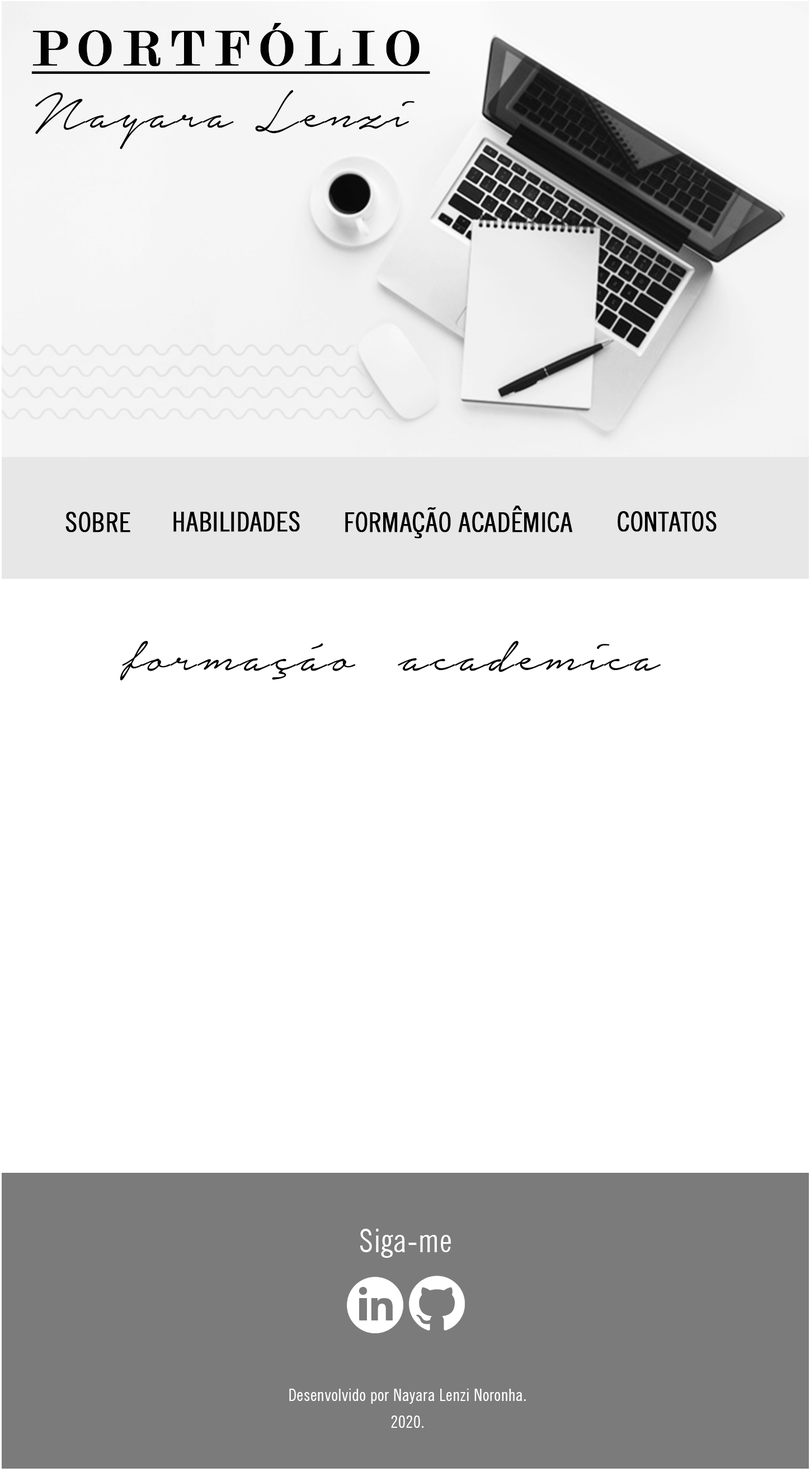
<style>
.page{position:relative;width:810px;height:1472px;background:#ffffff}
.page>*{position:absolute;margin:0}
.t1{font:52.3px "Modern-Regular";letter-spacing:0.2em;color:#010101;font-weight:bold;text-decoration:underline}
.t2{font:66.4px "NoteraPersonalUseOnly";letter-spacing:0.025em;color:#010101}
.t3{font:27.4px "NewsGothicBT-RomanCondensed";color:#000000;font-weight:bold}
.t4{font:67.1px "NoteraPersonalUseOnly";letter-spacing:0.025em;color:#000000}
.t5{font:31.9px "NewsGothicBT-RomanCondensed";letter-spacing:0.025em;color:#ffffff}
.t6{font:16.8px/26.8px "NewsGothicBT-RomanCondensed";letter-spacing:0.025em;color:#ffffff}
</style>
<div class="page">
<p class="t1" style="left:31px;top:23px;width:399px;height:51px">PORTFÓLIO</p>
<p class="t2" style="left:35px;top:90px;width:379px;height:59px">Nayara Lenzi</p>
<p class="t3" style="left:345px;top:506px;width:228px;height:33px">FORMAÇÃO ACADÊMICA</p>
<p class="t3" style="left:65px;top:512px;width:65px;height:21px">SOBRE</p>
<p class="t3" style="left:173px;top:511px;width:127px;height:21px">HABILIDADES</p>
<p class="t3" style="left:618px;top:511px;width:99px;height:21px">CONTATOS</p>
<p class="t4" style="left:120px;top:640px;width:541px;height:41px">formaçáo  academica</p>
<p class="t5" style="left:360px;top:1229px;width:91px;height:29px">Siga-me</p>
<p class="t6" style="left:289px;top:1389px;width:237px;height:39px;text-align:center">Desenvolvido por Nayara Lenzi Noronha.<br>2020.</p>
</div>
